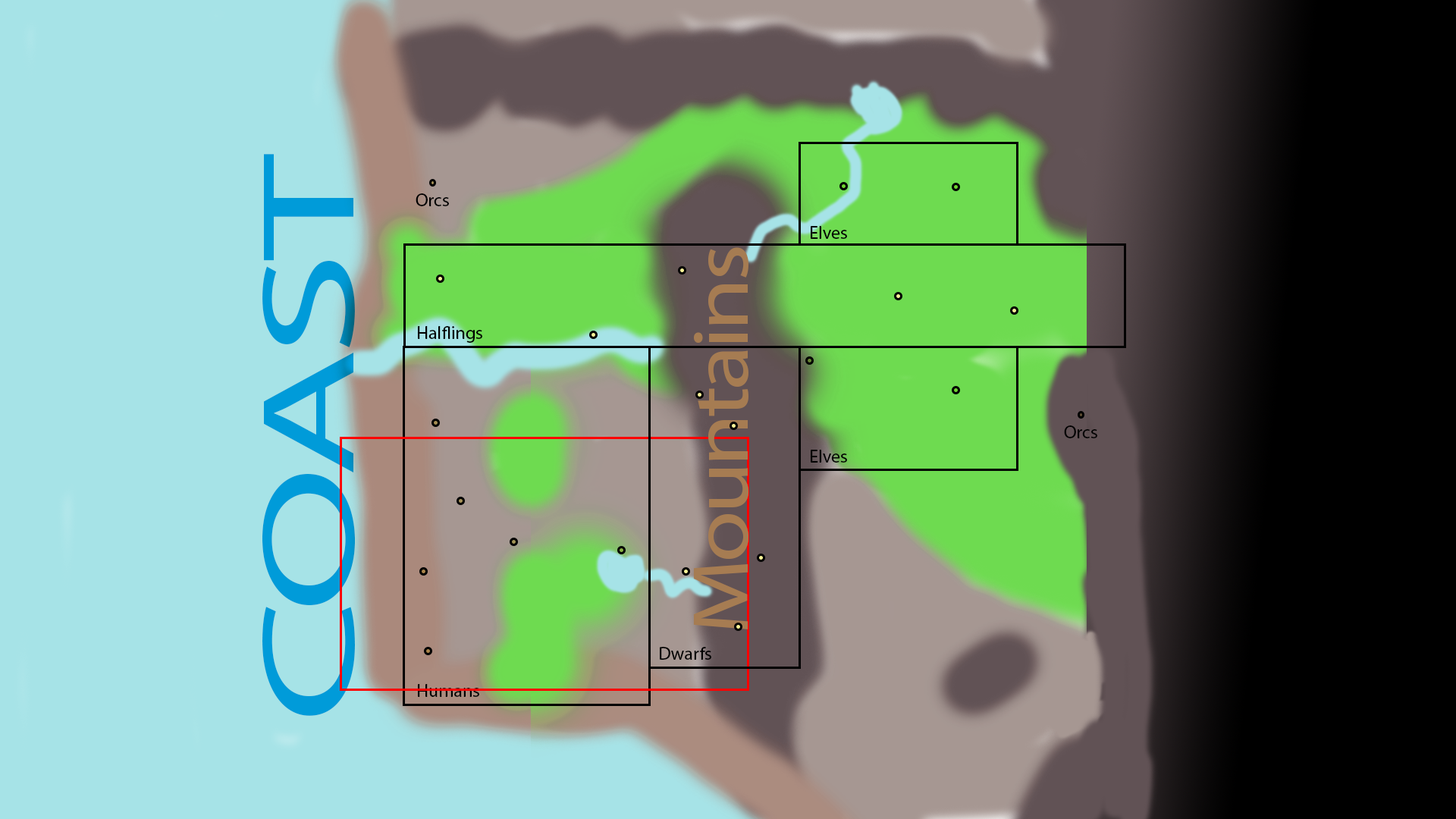
<style>
.page{position:relative;width:1456px;height:819px;background:#a6e3e7}
.page>*{position:absolute;margin:0}
.t1{font:132.9px "MyriadPro-Regular";letter-spacing:-0.04em;color:#00aeef;scale:1.6 1}
.t2{font:18.2px "MyriadPro-Regular";color:#000000}
.t3{font:79.7px "MyriadPro-Regular";letter-spacing:-0.04em;color:#a67c52;scale:1.18 1}
</style>
<div class="page">
<p class="t1" style="left:262px;top:154px;width:93px;height:562px;rotate:-90deg">COAST</p>
<p class="t2" style="left:416px;top:193px;width:33px;height:13px">Orcs</p>
<p class="t2" style="left:811px;top:226px;width:36px;height:13px">Elves</p>
<p class="t3" style="left:693px;top:247px;width:55px;height:382px;rotate:-90deg">Mountains</p>
<p class="t2" style="left:418px;top:326px;width:64px;height:17px">Halflings</p>
<p class="t2" style="left:1064px;top:425px;width:33px;height:13px">Orcs</p>
<p class="t2" style="left:811px;top:450px;width:36px;height:13px">Elves</p>
<p class="t2" style="left:660px;top:647px;width:51px;height:13px">Dwarfs</p>
<p class="t2" style="left:418px;top:684px;width:61px;height:13px">Humans</p>
</div>
